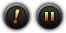
<style>
.page{position:relative;width:66px;height:33px}
.page>*{position:absolute;margin:0}
.t1{font:20px "MinionConceptItalic-BoldItalic";text-transform:uppercase}
</style>
<div class="page">
<p class="t1" style="left:13px;top:9px;width:7px;height:15px">!</p>
</div>
